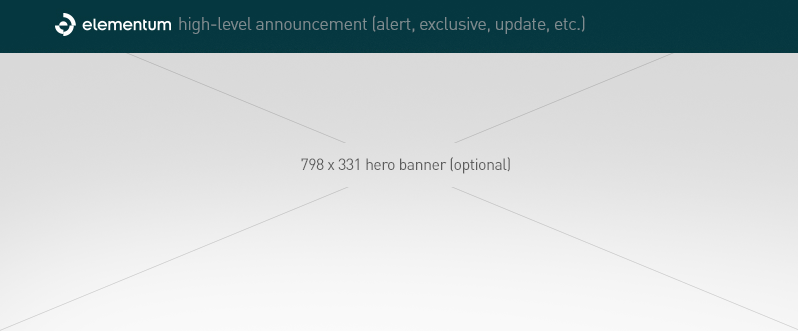
<style>
.page{position:relative;width:798px;height:331px}
.page>*{position:absolute;margin:0}
.t1{font:18px "DINPro";letter-spacing:-0.032em;color:#7d8d90}
.t2{font:16px "DINPro";letter-spacing:-0.032em;color:#5c5c5c}
</style>
<div class="page">
<p class="t1" style="left:179px;top:15px;width:406px;height:19px">high-level announcement (alert, exclusive, update, etc.)</p>
<p class="t2" style="left:301px;top:157px;width:209px;height:17px">798 x 331 hero banner (optional)</p>
</div>
